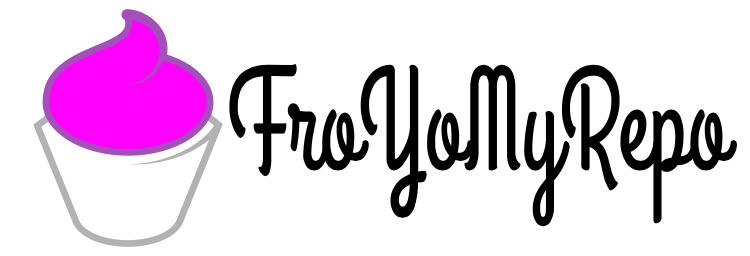
<style>
.page{position:relative;width:750px;height:256px;background:#ffffff}
.page>*{position:absolute;margin:0}
.t1{font:145.2px "GrandHotel-Regular";color:#000000;scale:0.73 1}
</style>
<div class="page">
<p class="t1" style="left:229px;top:63px;width:508px;height:164px">FroYoMyRepo</p>
</div>
